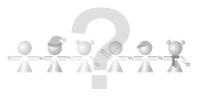
<style>
.page{position:relative;width:200px;height:100px;background:#ffffff}
.page>*{position:absolute;margin:0}
.t1{font:108px "ArialMT";color:#dfdfdf;font-weight:bold;scale:1.11 1}
</style>
<div class="page">
<p class="t1" style="left:71px;top:7px;width:59px;height:82px">?</p>
</div>
